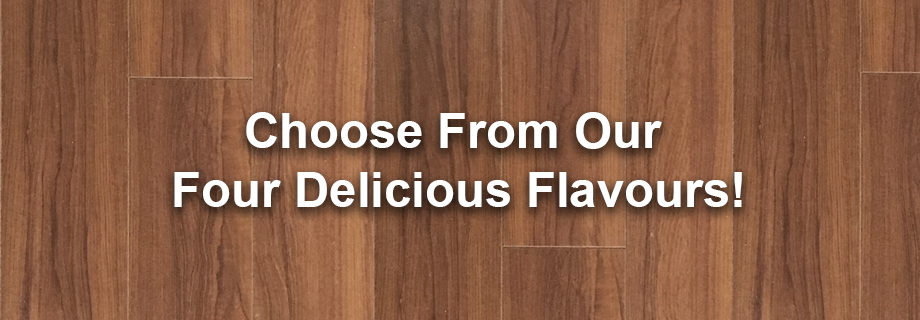
<style>
.page{position:relative;width:920px;height:320px}
.page>*{position:absolute;margin:0}
.t1{font:49.1px "Arial-BoldMT";color:#ffffff}
</style>
<div class="page">
<p class="t1" style="left:174px;top:112px;width:568px;height:95px;text-align:center">Choose From Our <br>Four Delicious Flavours!</p>
</div>
